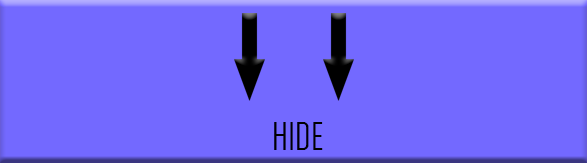
<style>
.page{position:relative;width:587px;height:163px;background:#7369ff}
.page>*{position:absolute;margin:0}
.t1{font:36px "AgencyFB-Reg";color:#000000}
</style>
<div class="page">
<p class="t1" style="left:274px;top:122px;width:49px;height:28px">HIDE</p>
</div>
